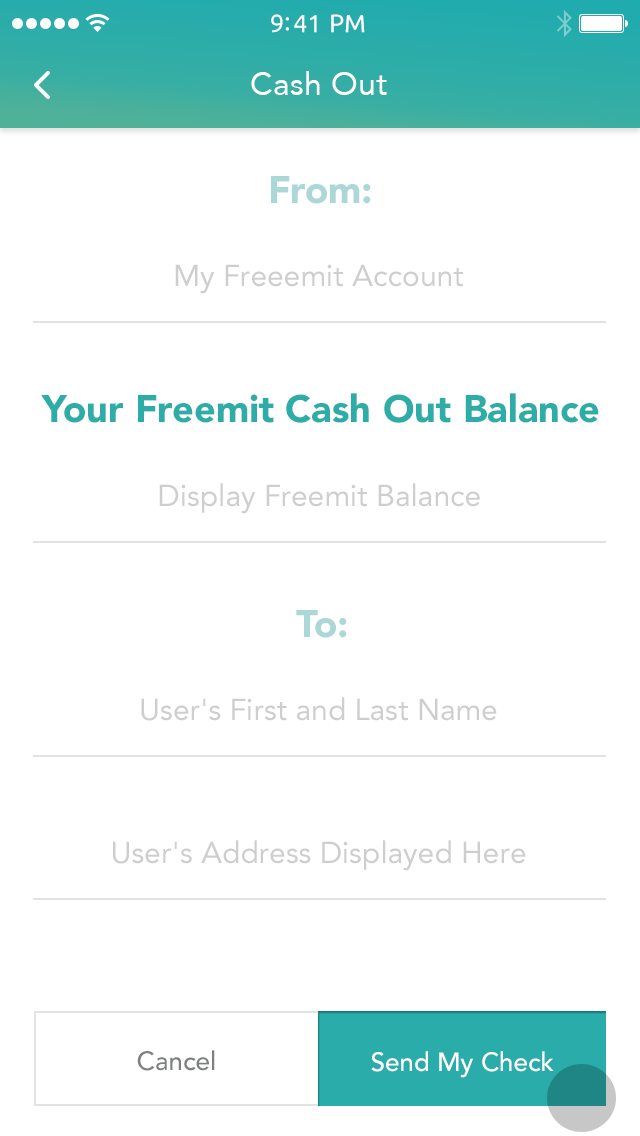
<style>
.page{position:relative;width:640px;height:1136px;background:#ffffff}
.page>*{position:absolute;margin:0}
.t1{font:25px "Ubuntu";color:#ffffff}
.t2{font:32px "Avenir-Roman";color:#ffffff}
.t3{font:38px "Avenir-Black";color:#abd8d6}
.t4{font:30px "Avenir-Roman";color:#cecece}
.t5{font:38px "Avenir-Black";color:#2eada8}
.t6{font:26px "Avenir-Medium";color:#7e7f7f}
.t7{font:26px "Avenir-Medium";color:#ffffff}
</style>
<div class="page">
<p class="t1" style="left:271px;top:14px;width:94px;height:19px">9:41 PM</p>
<p class="t2" style="left:251px;top:71px;width:136px;height:24px">Cash Out</p>
<p class="t3" style="left:271px;top:176px;width:100px;height:28px">From:</p>
<p class="t4" style="left:175px;top:264px;width:288px;height:30px">My Freeemit Account</p>
<p class="t5" style="left:41px;top:393px;width:558px;height:30px">Your Freemit Cash Out Balance</p>
<p class="t4" style="left:159px;top:483px;width:321px;height:31px">Display Freemit Balance</p>
<p class="t3" style="left:296px;top:610px;width:51px;height:28px">To:</p>
<p class="t4" style="left:141px;top:697px;width:356px;height:24px">User's First and Last Name</p>
<p class="t4" style="left:113px;top:840px;width:413px;height:31px">User's Address Displayed Here</p>
<p class="t6" style="left:137px;top:1050px;width:78px;height:21px">Cancel</p>
<p class="t7" style="left:371px;top:1051px;width:183px;height:27px">Send My Check</p>
</div>
